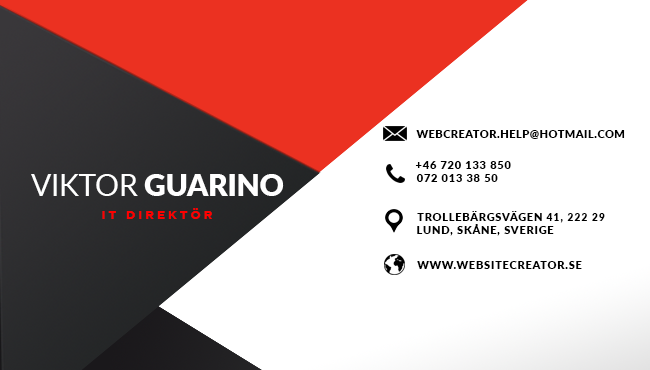
<style>
.page{position:relative;width:650px;height:370px;background:#ffffff}
.page>*{position:absolute;margin:0}
.t1{font:10.4px "Lato-Black";letter-spacing:0.065em;color:#000000}
.t2{font:10.2px "Lato-Black";letter-spacing:0.09em;color:#000000;scale:1.04 1}
.t3{font:30px "Lato-Black";letter-spacing:-0.01em;color:#ffffff}
.t4{font:30px "Lato-Regular";letter-spacing:-0.01em;color:#ffffff}
.t5{font:12px "GothamBold";letter-spacing:0.25em;color:#ff0000}
.t6{font:10.4px "Lato-Black";letter-spacing:0.09em;color:#000000}
</style>
<div class="page">
<p class="t1" style="left:416px;top:130px;width:209px;height:9px">WEBCREATOR.HELP@HOTMAIL.COM</p>
<p class="t2" style="left:415px;top:161px;width:96px;height:8px">+46 720 133 850</p>
<p class="t3" style="left:31px;top:174px;width:253px;height:22px"><span class="t4">VIKTOR</span> GUARINO</p>
<p class="t2" style="left:416px;top:174px;width:82px;height:8px">072 013 38 50</p>
<p class="t5" style="left:102px;top:208px;width:110px;height:11px">IT DIREKTÖR</p>
<p class="t6" style="left:417px;top:211px;width:188px;height:12px">TROLLEBÄRGSVÄGEN 41, 222 29</p>
<p class="t6" style="left:417px;top:224px;width:137px;height:12px">LUND, SKÅNE, SVERIGE</p>
<p class="t6" style="left:417px;top:261px;width:165px;height:8px">WWW.WEBSITECREATOR.SE</p>
</div>
